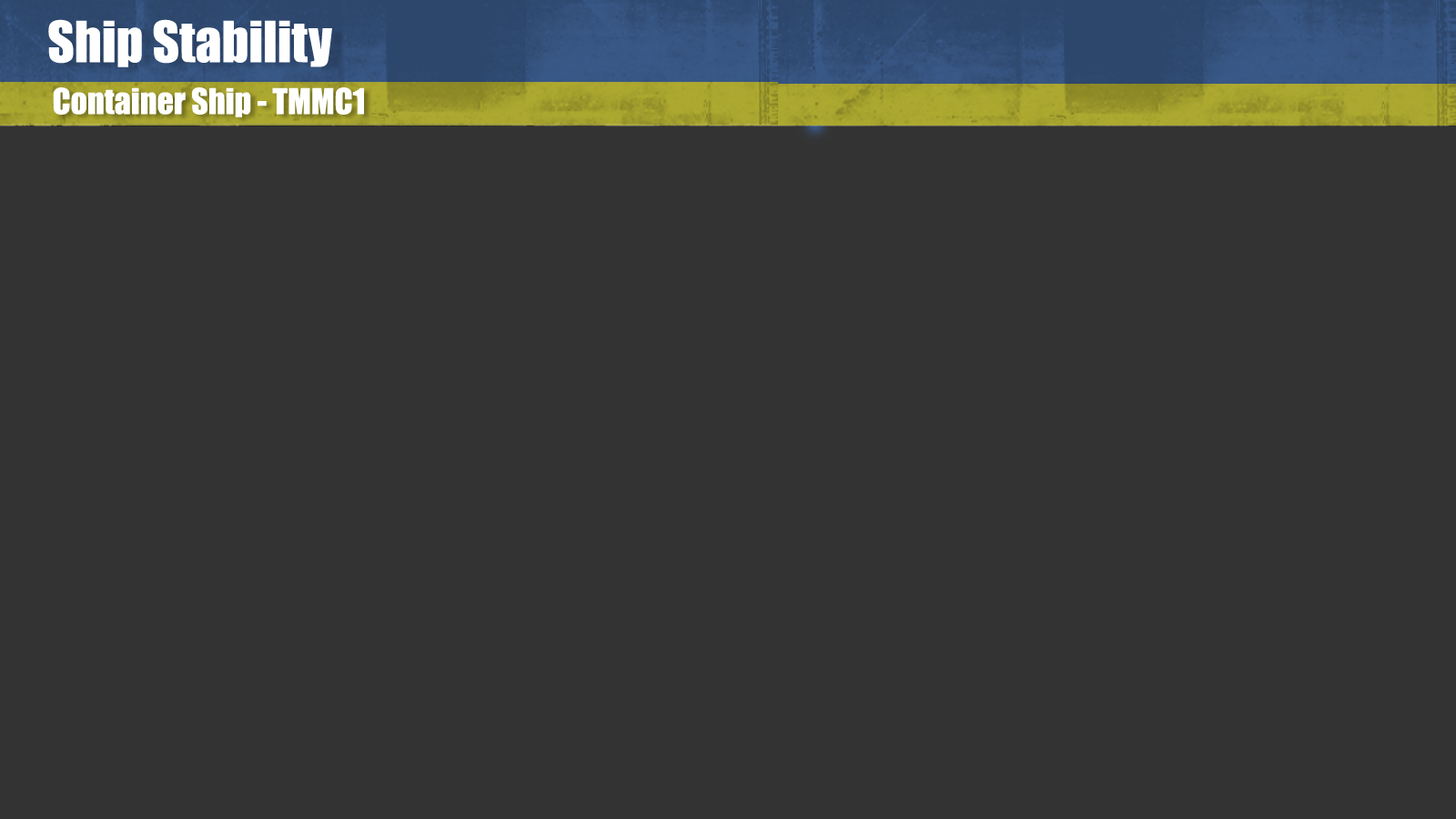
<style>
.page{position:relative;width:1456px;height:819px;background:#333333}
.page>*{position:absolute;margin:0}
.t1{font:52.2px "Impact";color:#ffffff}
.t2{font:32.8px "Impact";color:#ffffff}
</style>
<div class="page">
<p class="t1" style="left:48px;top:19px;width:284px;height:48px">Ship Stability</p>
<p class="t2" style="left:53px;top:87px;width:311px;height:30px">Container Ship - TMMC1</p>
</div>
